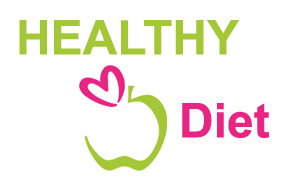
<style>
.page{position:relative;width:289px;height:189px;background:#ffffff}
.page>*{position:absolute;margin:0}
.t1{font:48px "Arial-BoldMT";color:#a4c736}
.t2{font:48px "Arial-BoldMT";color:#e82583}
</style>
<div class="page">
<p class="t1" style="left:19px;top:20px;width:221px;height:35px">HEALTHY</p>
<p class="t2" style="left:182px;top:103px;width:88px;height:35px">Diet</p>
</div>
